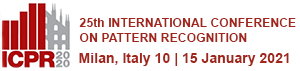
<style>
.page{position:relative;width:300px;height:71px;background:#ffffff}
.page>*{position:absolute;margin:0}
.t1{font:12.2px "Arial-BoldMT";color:#a2251c}
.t2{font:14.1px "Arial-BoldMT";color:#a2251c}
</style>
<div class="page">
<p class="t1" style="left:79px;top:18px;width:217px;height:9px">25th INTERNATIONAL CONFERENCE</p>
<p class="t1" style="left:79px;top:33px;width:168px;height:9px">ON PATTERN RECOGNITION</p>
<p class="t2" style="left:79px;top:53px;width:210px;height:13px">Milan, Italy 10 | 15 January 2021</p>
</div>
